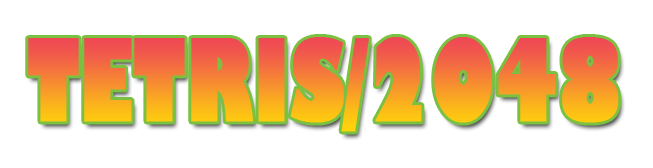
<style>
.page{position:relative;width:653px;height:168px;background:#ffffff}
.page>*{position:absolute;margin:0}
.t1{font:110px "GillSans-UltraBold";font-weight:bold;scale:0.66 1}
</style>
<div class="page">
<p class="t1" style="left:28px;top:37px;width:591px;height:95px">TETRIS/2048</p>
</div>
